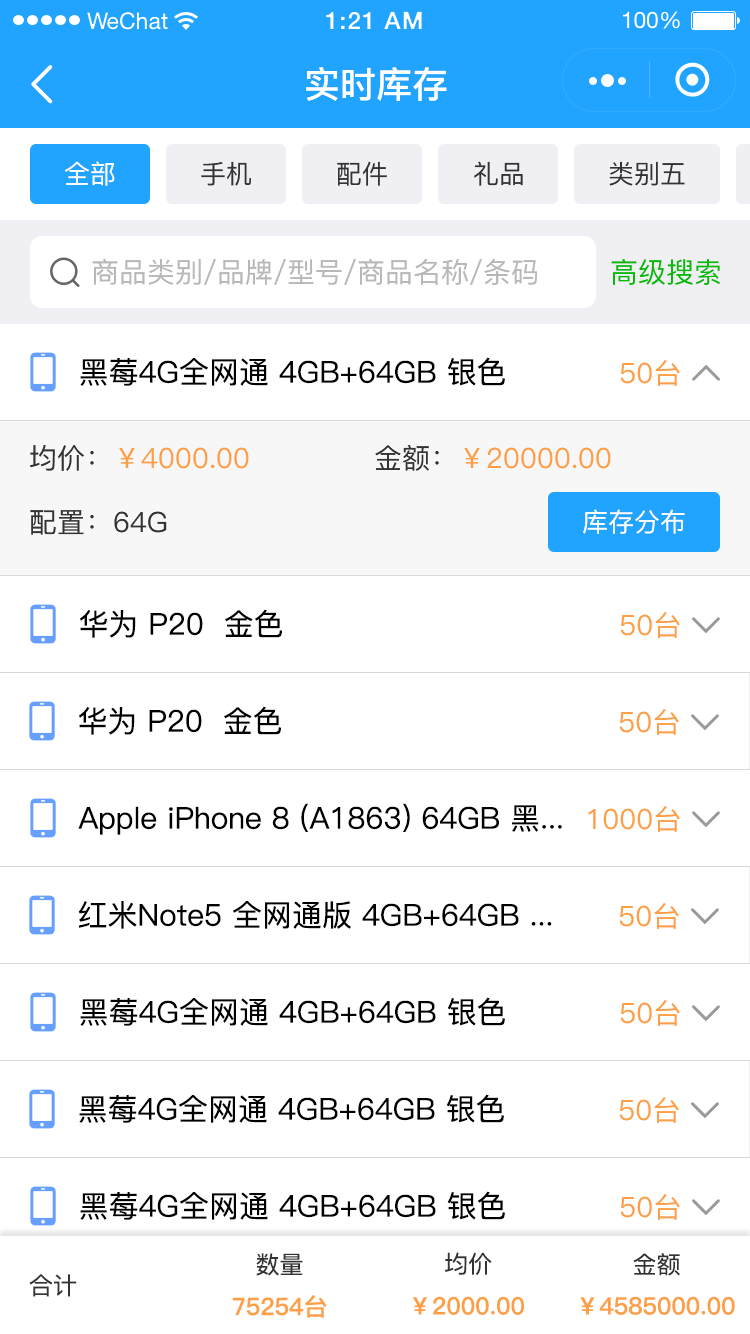
<style>
.page{position:relative;width:750px;height:1334px;background:#ffffff}
.page>*{position:absolute;margin:0}
.t1{font:36px "PingFang-SC-Bold";color:#ffffff}
.t2{font:26px "PingFang-SC-Medium";color:#ffffff}
.t3{font:26px "PingFang-SC-Medium";color:#333333}
.t4{font:28px "PingFang-SC-Medium";color:#b8b8b8}
.t5{font:28px "PingFang-SC-Medium";color:#09bb07}
.t6{font:30px "PingFang-SC-Medium";color:#000000}
.t7{font:28px "PingFang-SC-Medium";color:#fe9f45}
.t8{font:28px "PingFang-SC-Medium";color:#333333}
.t9{font:24px "PingFang-SC-Medium";color:#333333}
.t10{font:24px "PingFang-SC-Bold";color:#fe9f45}
</style>
<div class="page">
<p class="t1" style="left:306px;top:67px;width:141px;height:34px">实时库存</p>
<p class="t2" style="left:65px;top:161px;width:50px;height:25px">全部</p>
<p class="t3" style="left:201px;top:161px;width:50px;height:25px">手机</p>
<p class="t3" style="left:337px;top:161px;width:50px;height:25px">配件</p>
<p class="t3" style="left:474px;top:161px;width:49px;height:25px">礼品</p>
<p class="t3" style="left:609px;top:161px;width:76px;height:25px">类别五</p>
<p class="t4" style="left:92px;top:258px;width:445px;height:27px">商品类别/品牌/型号/商品名称/条码</p>
<p class="t5" style="left:611px;top:259px;width:109px;height:26px">高级搜索</p>
<p class="t6" style="left:80px;top:357px;width:425px;height:29px">黑莓4G全网通 4GB+64GB 银色</p>
<p class="t7" style="left:620px;top:360px;width:60px;height:26px">50台</p>
<p class="t7" style="left:30px;top:445px;width:219px;height:26px"><span class="t8">均价：</span>￥4000.00</p>
<p class="t7" style="left:375px;top:445px;width:236px;height:26px"><span class="t8">金额：</span>￥20000.00</p>
<p class="t8" style="left:30px;top:510px;width:137px;height:25px">配置：64G</p>
<p class="t2" style="left:583px;top:509px;width:102px;height:25px">库存分布</p>
<p class="t6" style="left:80px;top:609px;width:203px;height:29px">华为 P20  金色</p>
<p class="t7" style="left:620px;top:612px;width:60px;height:26px">50台</p>
<p class="t6" style="left:79px;top:706px;width:203px;height:29px">华为 P20  金色</p>
<p class="t7" style="left:619px;top:709px;width:60px;height:26px">50台</p>
<p class="t6" style="left:78px;top:803px;width:484px;height:32px">Apple iPhone 8 (A1863) 64GB 黑...</p>
<p class="t7" style="left:588px;top:806px;width:92px;height:26px">1000台</p>
<p class="t6" style="left:78px;top:901px;width:474px;height:28px">红米Note5 全网通版 4GB+64GB ...</p>
<p class="t7" style="left:619px;top:903px;width:60px;height:26px">50台</p>
<p class="t6" style="left:80px;top:997px;width:425px;height:29px">黑莓4G全网通 4GB+64GB 银色</p>
<p class="t7" style="left:620px;top:1000px;width:60px;height:26px">50台</p>
<p class="t6" style="left:79px;top:1094px;width:425px;height:29px">黑莓4G全网通 4GB+64GB 银色</p>
<p class="t7" style="left:619px;top:1097px;width:60px;height:26px">50台</p>
<p class="t6" style="left:80px;top:1191px;width:425px;height:29px">黑莓4G全网通 4GB+64GB 银色</p>
<p class="t7" style="left:620px;top:1194px;width:60px;height:26px">50台</p>
<p class="t9" style="left:256px;top:1253px;width:47px;height:23px">数量</p>
<p class="t9" style="left:445px;top:1252px;width:47px;height:23px">均价</p>
<p class="t9" style="left:633px;top:1253px;width:47px;height:23px">金额</p>
<p class="t9" style="left:29px;top:1274px;width:48px;height:23px">合计</p>
<p class="t10" style="left:232px;top:1295px;width:95px;height:23px">75254台</p>
<p class="t10" style="left:413px;top:1296px;width:111px;height:19px">￥2000.00</p>
<p class="t10" style="left:580px;top:1296px;width:155px;height:19px">￥4585000.00</p>
</div>
